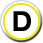
<style>
.page{position:relative;width:43px;height:43px;background:#ffffff}
.page>*{position:absolute;margin:0}
.t1{font:27.6px "HelveticaNeue-Bold";color:#010101}
</style>
<div class="page">
<p class="t1" style="left:13px;top:11px;width:18px;height:20px">D</p>
</div>
